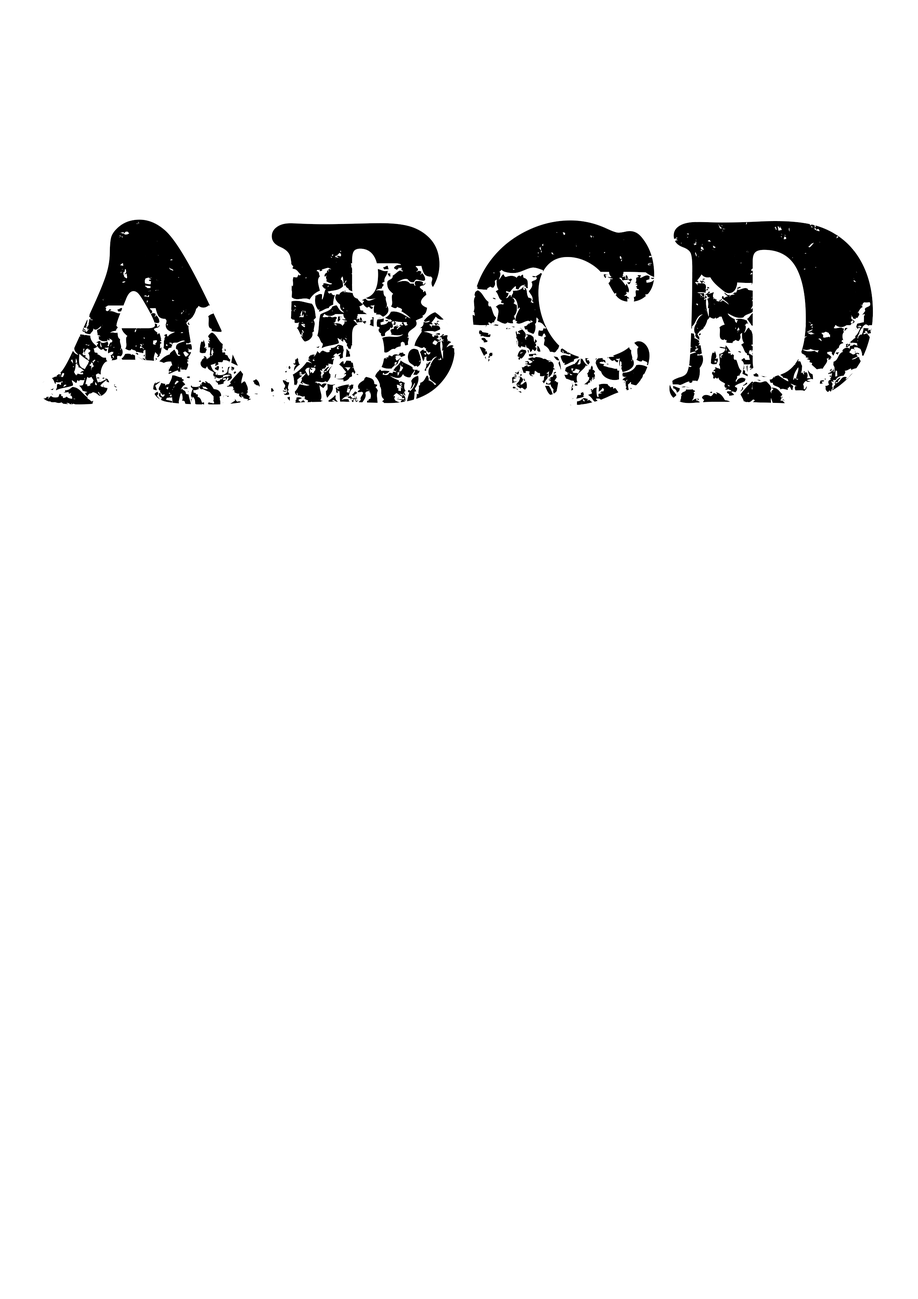
<style>
.page{position:relative;width:918px;height:1299px;background:#ffffff}
.page>*{position:absolute;margin:0}
.t1{font:266.4px "CooperBlack";letter-spacing:0.03em;color:#000000}
</style>
<div class="page">
<p class="t1" style="left:40px;top:220px;width:833px;height:185px">ABCD</p>
</div>
